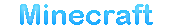
<style>
.page{position:relative;width:171px;height:28px;background:#ffffff}
.page>*{position:absolute;margin:0}
.t1{font:29px "ArialRoundedMTBold"}
</style>
<div class="page">
<p class="t1" style="left:20px;top:4px;width:133px;height:21px">Minecraft</p>
</div>
